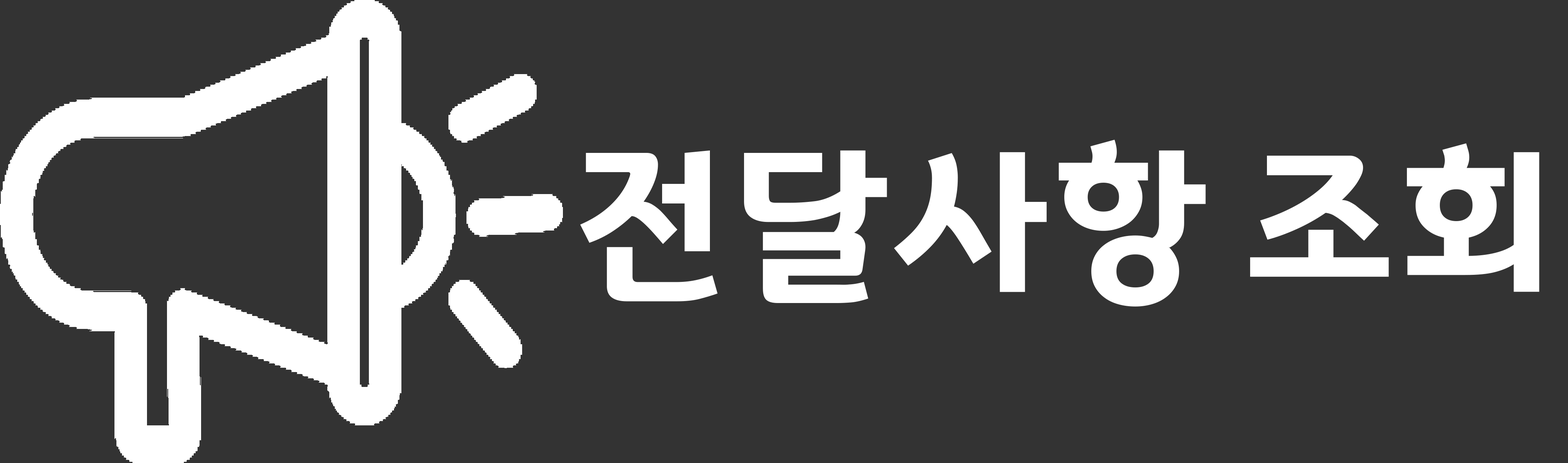
<style>
.page{position:relative;width:1568px;height:463px;background:#333333}
.page>*{position:absolute;margin:0}
.t1{font:173.1px "GyeonggiTitleV";letter-spacing:-0.08em;color:#ffffff}
</style>
<div class="page">
<p class="t1" style="left:580px;top:140px;width:959px;height:167px">전달사항 조회</p>
</div>
